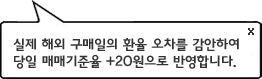
<style>
.page{position:relative;width:262px;height:79px;background:#ffffff}
.page>*{position:absolute;margin:0}
.t1{font:18px "Fixedsys";letter-spacing:-0.15em;color:#333333}
.t2{font:14px "YDIYGO240-KSCpc-EUC-H";letter-spacing:-0.15em;color:#333333}
</style>
<div class="page">
<p class="t1" style="left:248px;top:28px;width:6px;height:7px">x</p>
<p class="t2" style="left:13px;top:38px;width:226px;height:31px">실제 해외 구매일의 환율 오차를 감안하여<br>당일 매매기준율 +20원으로 반영합니다.</p>
</div>
